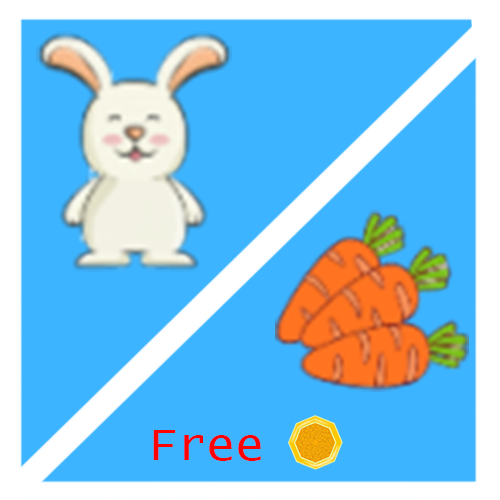
<style>
.page{position:relative;width:500px;height:500px;background:#3cb4ff}
.page>*{position:absolute;margin:0}
.t1{font:48px "LucidaConsole";color:#ff0101}
</style>
<div class="page">
<p class="t1" style="left:153px;top:430px;width:108px;height:31px">Free</p>
</div>
